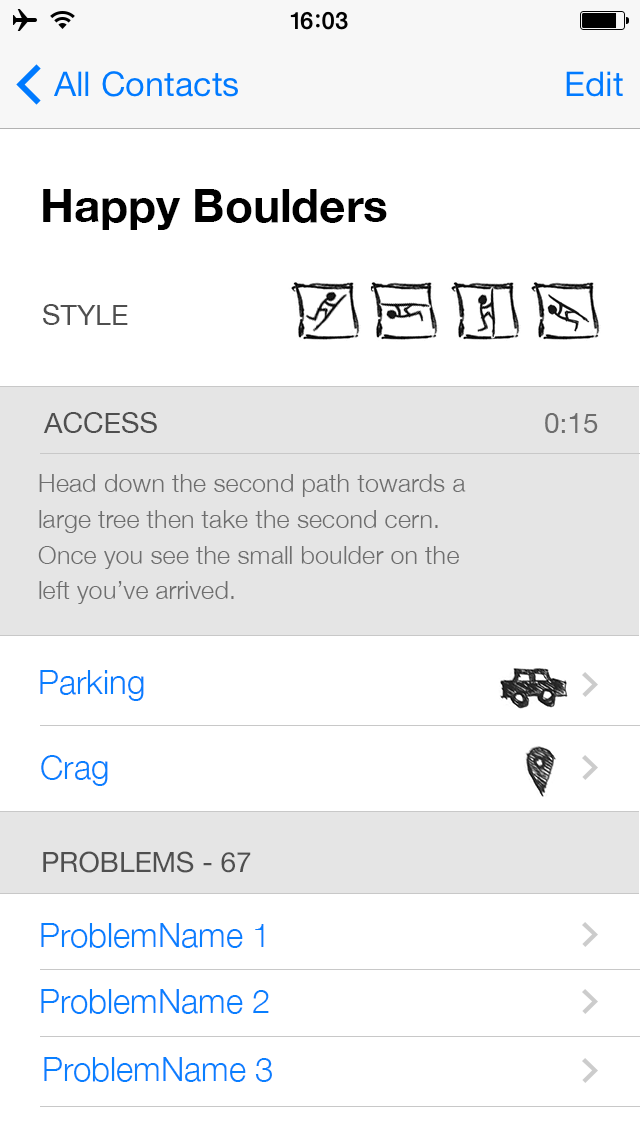
<style>
.page{position:relative;width:640px;height:1136px;background:#ffffff}
.page>*{position:absolute;margin:0}
.t1{font:45.7px "HelveticaNeue-Bold";color:#000000}
.t2{font:28.4px "HelveticaNeue";color:#4f4f4f}
.t3{font:27.9px "HelveticaNeue";color:#6e6e6e}
.t4{font:25.4px/35.6px "HelveticaNeue-Light";color:#6e6e6e}
.t5{font:33px "HelveticaNeue-Light";color:#097eff}
.t6{font:33px "HelveticaNeue-Light";color:#097fff}
.t7{font:28px "HelveticaNeue";color:#4f4f4f}
</style>
<div class="page">
<p class="t1" style="left:43px;top:189px;width:344px;height:41px">Happy Boulders</p>
<p class="t2" style="left:43px;top:304px;width:85px;height:21px">STYLE</p>
<p class="t2" style="left:43px;top:412px;width:114px;height:21px">ACCESS</p>
<p class="t3" style="left:545px;top:413px;width:53px;height:20px">0:15</p>
<p class="t4" style="left:38px;top:474px;width:428px;height:130px">Head down the second path towards a <br>large tree then take the second cern. <br>Once you see the small boulder on the <br>left you’ve arrived.</p>
<p class="t5" style="left:40px;top:670px;width:104px;height:31px">Parking</p>
<p class="t6" style="left:41px;top:755px;width:67px;height:31px">Crag</p>
<p class="t7" style="left:43px;top:851px;width:208px;height:22px">PROBLEMS - 67</p>
<p class="t6" style="left:41px;top:923px;width:223px;height:25px">ProblemName 1</p>
<p class="t6" style="left:41px;top:989px;width:228px;height:25px">ProblemName 2</p>
<p class="t6" style="left:44px;top:1057px;width:228px;height:25px">ProblemName 3</p>
</div>
